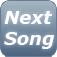
<style>
.page{position:relative;width:57px;height:57px}
.page>*{position:absolute;margin:0}
.t1{font:18px "Verdana-BoldItalic";color:#ffffff}
</style>
<div class="page">
<p class="t1" style="left:4px;top:11px;width:51px;height:38px">Next<br>Song</p>
</div>
